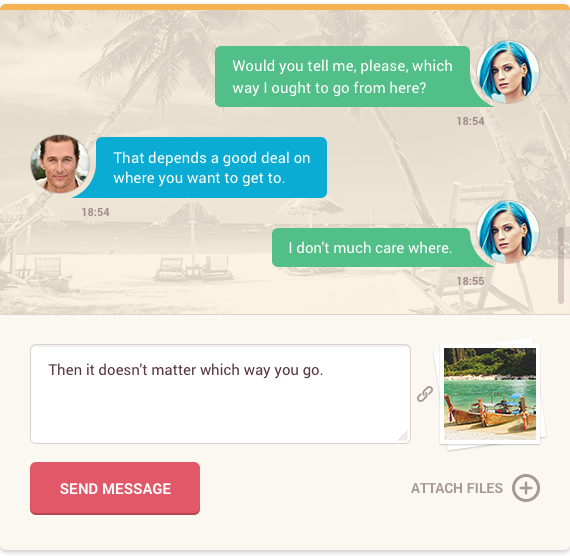
<style>
.page{position:relative;width:570px;height:556px;background:#fbf8f1}
.page>*{position:absolute;margin:0}
.t1{font:15px/22px "Roboto-Regular";color:#ffffff}
.t2{font:11px "Roboto-Bold";color:#9e8887}
.t3{font:15px/20px "Roboto-Regular";color:#ffffff}
.t4{font:11px "Roboto-Bold";color:#a28b8b}
.t5{font:15px "Roboto-Regular";color:#ffffff}
.t6{font:11px "Roboto-Bold";color:#a18a89}
.t7{font:15px "Roboto-Regular";color:#563743}
.t8{font:15px "Roboto-Bold";color:#ffffff;text-transform:uppercase}
.t9{font:14px "Roboto-Bold";color:#a8979a;text-transform:uppercase}
</style>
<div class="page">
<p class="t1" style="left:232px;top:59px;width:220px;height:38px">Would you tell me, please, which way I ought to go from here?</p>
<p class="t2" style="left:457px;top:116px;width:28px;height:10px">18:54</p>
<p class="t3" style="left:113px;top:151px;width:197px;height:36px">That depends a good deal on where you want to get to.</p>
<p class="t4" style="left:82px;top:207px;width:28px;height:10px">18:54</p>
<p class="t5" style="left:289px;top:241px;width:163px;height:13px">I don't much care where.</p>
<p class="t6" style="left:457px;top:276px;width:27px;height:10px">18:55</p>
<p class="t7" style="left:48px;top:363px;width:275px;height:16px">Then it doesn't matter which way you go.</p>
<p class="t8" style="left:60px;top:483px;width:111px;height:12px">Send Message</p>
<p class="t9" style="left:411px;top:483px;width:92px;height:11px">Attach Files</p>
</div>
